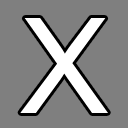
<style>
.page{position:relative;width:128px;height:128px;background:#7f7f7f}
.page>*{position:absolute;margin:0}
.t1{font:133.3px "ArialMT";color:#ffffff}
</style>
<div class="page">
<p class="t1" style="left:20px;top:18px;width:88px;height:95px">X</p>
</div>
